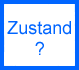
<style>
.page{position:relative;width:79px;height:70px;background:#ffffff}
.page>*{position:absolute;margin:0}
.t1{font:17.9px "ArialMT";color:#0065ff}
</style>
<div class="page">
<p class="t1" style="left:7px;top:21px;width:64px;height:34px;text-align:center">Zustand?</p>
</div>
